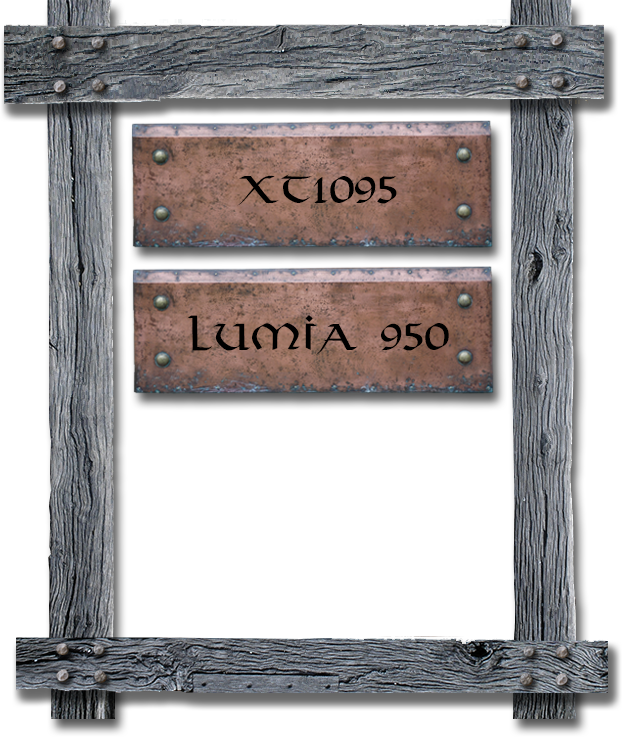
<style>
.page{position:relative;width:622px;height:737px;background:#ffffff}
.page>*{position:absolute;margin:0}
.t1{font:36px "Viking-Medium";color:#000000}
</style>
<div class="page">
<p class="t1" style="left:237px;top:174px;width:160px;height:32px">XT1095</p>
<p class="t1" style="left:187px;top:315px;width:262px;height:40px">LUMIA 950</p>
</div>
